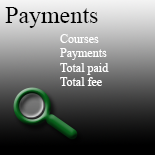
<style>
.page{position:relative;width:155px;height:155px}
.page>*{position:absolute;margin:0}
.t1{font:24px "TimesNewRomanPSMT";color:#000000}
.t2{font:12px "TimesNewRomanPSMT";color:#ffffff}
</style>
<div class="page">
<p class="t1" style="left:5px;top:7px;width:93px;height:21px">Payments</p>
<p class="t2" style="left:60px;top:34px;width:49px;height:52px">Courses<br>Payments<br>Total paid<br>Total fee</p>
</div>
